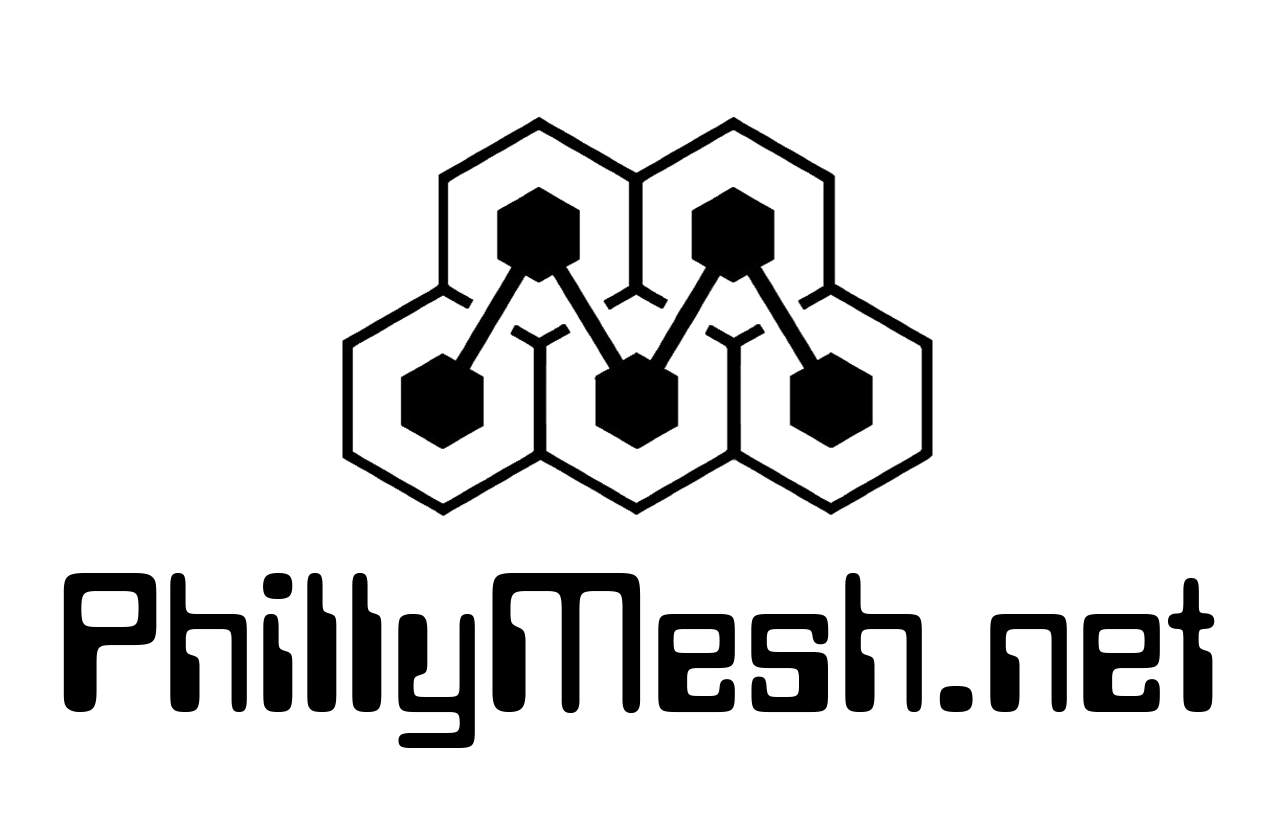
<style>
.page{position:relative;width:1275px;height:825px;background:#ffffff}
.page>*{position:absolute;margin:0}
.t1{font:208.3px "DataSeventyPlain";color:#000000}
</style>
<div class="page">
<p class="t1" style="left:63px;top:573px;width:1152px;height:175px">PhillyMesh.net</p>
</div>
